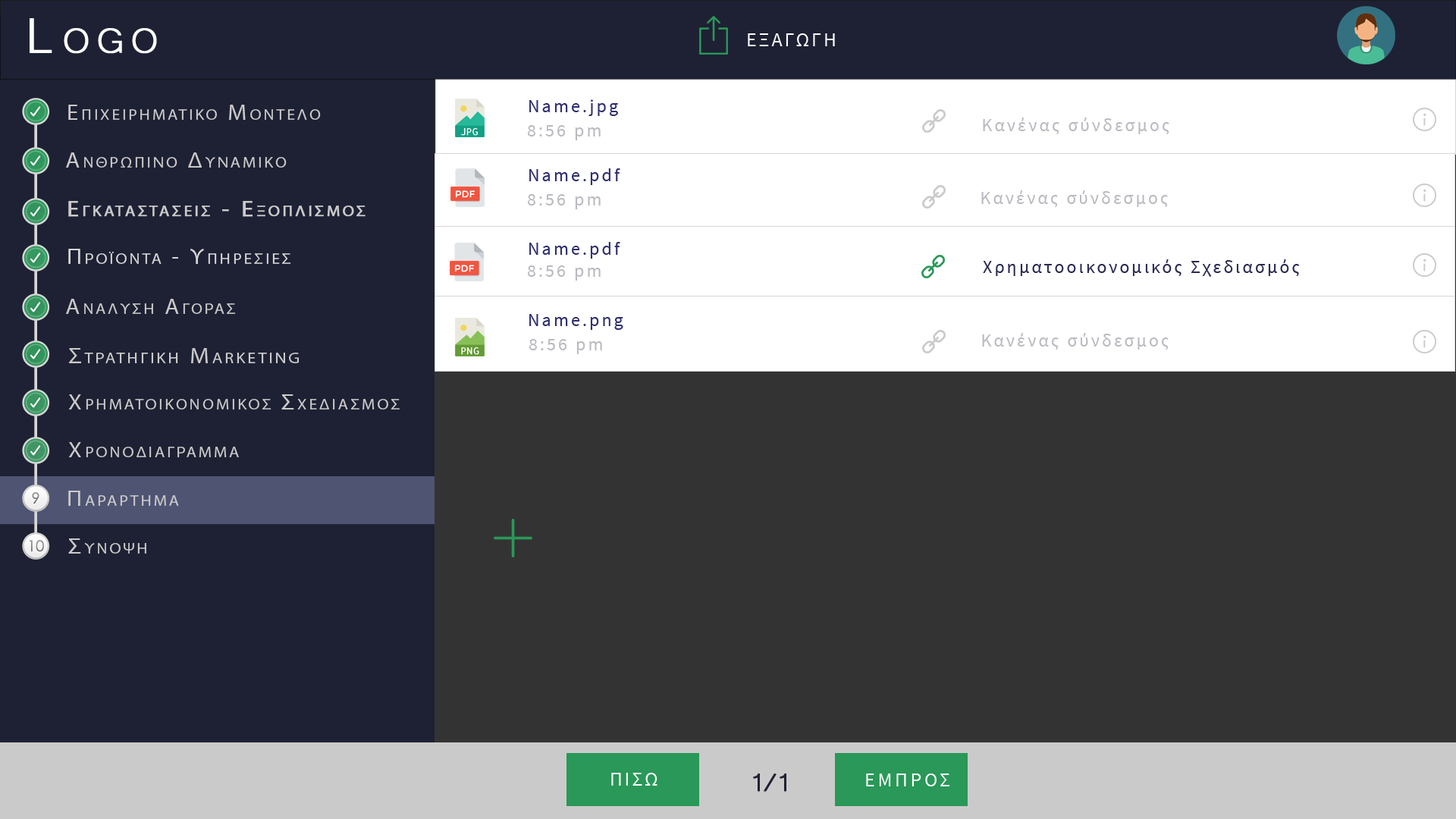
<style>
.page{position:relative;width:1456px;height:819px;background:#333333}
.page>*{position:absolute;margin:0}
.t1{font:63.7px "Microsoft-Yi-Baiti";letter-spacing:0.13em;color:#ffffff;font-variant:small-caps;font-weight:bold}
.t2{font:20px "SourceSansPro-Regular";letter-spacing:0.1em;color:#fefefe;text-transform:uppercase}
.t3{font:18.2px "SourceSansPro-Regular";letter-spacing:0.13em;color:#2f2f70}
.t4{font:18.2px "SourceSansPro-Regular";letter-spacing:0.13em;color:#2f2f70;text-transform:uppercase}
.t5{font:21.7px "MyriadPro-Regular";letter-spacing:0.13em;color:#cbcaca;font-variant:small-caps;scale:1.09 1}
.t6{font:23.4px "Microsoft-Yi-Baiti";letter-spacing:0.13em;color:#cbcaca;font-variant:small-caps;font-weight:bold}
.t7{font:18.2px "SourceSansPro-Regular";letter-spacing:0.13em;color:#babac1}
.t8{font:21.7px/91px "MyriadPro-Regular";letter-spacing:0.13em;color:#cbcaca;font-variant:small-caps;font-weight:bold;scale:1.09 1}
.t9{font:23.4px/91px "Microsoft-Yi-Baiti";letter-spacing:0.13em;color:#cbcaca;font-variant:small-caps;font-weight:bold}
.t10{font:21.7px "MyriadPro-Regular";letter-spacing:0.13em;color:#d6d6d6;font-variant:small-caps;scale:1.09 1}
.t11{font:23.4px "Microsoft-Yi-Baiti";letter-spacing:0.13em;color:#d6d6d6;font-variant:small-caps;font-weight:bold}
.t12{font:18.2px "SourceSansPro-Regular";letter-spacing:0.13em;color:#2a2a52}
.t13{font:22.2px "MyriadPro-Regular";letter-spacing:0.13em;color:#cbcaca;font-variant:small-caps;scale:1.09 1}
.t14{font:25.5px "Microsoft-Yi-Baiti";letter-spacing:0.13em;color:#cbcaca;font-variant:small-caps;font-weight:bold}
.t15{font:15.3px "CenturyGothic";color:#838383}
.t16{font:23.7px "Microsoft-Yi-Baiti";letter-spacing:0.13em;color:#cbcaca;font-variant:small-caps;scale:1.09 1}
.t17{font:15.3px "CenturyGothic";color:#878787}
.t18{font:32.8px "Microsoft-Yi-Baiti";letter-spacing:-0.1em;color:#1e2133;font-weight:bold}
.t19{font:20px "SourceSansPro-Regular";letter-spacing:0.13em;color:#fefefe;text-transform:uppercase}
</style>
<div class="page">
<p class="t1" style="left:30px;top:18px;width:127px;height:36px">Logo</p>
<p class="t2" style="left:748px;top:33px;width:87px;height:13px">εξαγωγη</p>
<p class="t3" style="left:529px;top:99px;width:89px;height:17px"><span class="t4">N</span>ame.jpg</p>
<p class="t5" style="left:68px;top:105px;width:253px;height:15px"><span class="t6">   </span>Επιχειρηματικο Μοντελο</p>
<p class="t7" style="left:527px;top:125px;width:74px;height:15px">8:56 pm</p>
<p class="t7" style="left:983px;top:118px;width:186px;height:16px">Κανένας σύνδεσμος</p>
<p class="t5" style="left:66px;top:152px;width:221px;height:16px"><span class="t6">   </span>Ανθρωπινο Δυναμικο</p>
<p class="t3" style="left:529px;top:168px;width:91px;height:17px"><span class="t4">N</span>ame.pdf</p>
<p class="t7" style="left:527px;top:194px;width:74px;height:15px">8:56 pm</p>
<p class="t7" style="left:981px;top:190px;width:187px;height:17px">Κανένας σύνδεσμος</p>
<p class="t8" style="left:68px;top:201px;width:298px;height:16px"><span class="t9">   </span>Εγκαταστασεισ - Εξοπλισμοσ<br><br><span class="t9">Equipment</span></p>
<p class="t3" style="left:529px;top:242px;width:91px;height:17px"><span class="t4">N</span>ame.pdf</p>
<p class="t10" style="left:68px;top:249px;width:223px;height:15px"><span class="t11">   </span>Προϊοντα - Υπηρεσιεσ</p>
<p class="t7" style="left:527px;top:265px;width:74px;height:16px">8:56 pm</p>
<p class="t12" style="left:983px;top:259px;width:317px;height:18px">Χρηματοοικονομικός Σχεδιασμός</p>
<p class="t5" style="left:66px;top:299px;width:170px;height:15px"><span class="t6">   </span>Αναλυση Αγορασ</p>
<p class="t3" style="left:529px;top:314px;width:94px;height:16px"><span class="t4">N</span>ame.png</p>
<p class="t7" style="left:529px;top:339px;width:73px;height:15px">8:56 pm</p>
<p class="t7" style="left:982px;top:333px;width:187px;height:17px">Κανένας σύνδεσμος</p>
<p class="t13" style="left:69px;top:348px;width:230px;height:15px"><span class="t14">   </span>Στρατηγικη Marketing</p>
<p class="t5" style="left:68px;top:394px;width:332px;height:15px"><span class="t14">   </span>Χρηματοικονομικοσ Σχεδιασμοσ</p>
<p class="t5" style="left:68px;top:442px;width:171px;height:15px"><span class="t14">   </span>Χρονοδιαγραμμα</p>
<p class="t15" style="left:32px;top:492px;width:7px;height:12px">9</p>
<p class="t5" style="left:68px;top:491px;width:111px;height:15px"><span class="t16">   </span>Παραρτημα</p>
<p class="t17" style="left:29px;top:540px;width:15px;height:12px">10</p>
<p class="t5" style="left:68px;top:538px;width:78px;height:16px"><span class="t16">   </span>Συνοψη</p>
<p class="t2" style="left:611px;top:773px;width:46px;height:13px">Πισω</p>
<p class="t18" style="left:753px;top:773px;width:33px;height:19px">1/1</p>
<p class="t19" style="left:866px;top:773px;width:83px;height:13px">εμπροσ</p>
</div>
